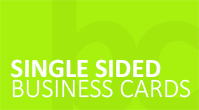
<style>
.page{position:relative;width:199px;height:110px;background:#a8f00e}
.page>*{position:absolute;margin:0}
.t1{font:26.6px "Calibri-Bold";color:#ffffff}
.t2{font:26.6px "Calibri-Light";color:#ffffff}
</style>
<div class="page">
<p class="t1" style="left:11px;top:59px;width:150px;height:19px">SINGLE SIDED</p>
<p class="t2" style="left:12px;top:79px;width:179px;height:19px">BUSINESS CARDS</p>
</div>
